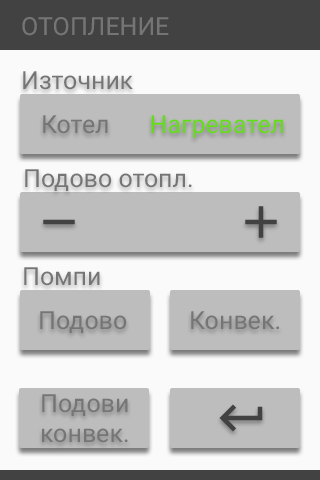
<style>
.page{position:relative;width:320px;height:480px;background:#fafafa}
.page>*{position:absolute;margin:0}
.t1{font:25px "Roboto-Regular";color:#757575}
.t2{font:25px "Roboto-Regular";color:#64dd17}
</style>
<div class="page">
<p class="t1" style="left:22px;top:17px;width:147px;height:19px">ОТОПЛЕНИЕ</p>
<p class="t1" style="left:23px;top:71px;width:110px;height:19px">Източник</p>
<p class="t1" style="left:43px;top:115px;width:65px;height:19px">Котел</p>
<p class="t2" style="left:151px;top:115px;width:132px;height:23px">Нагревател</p>
<p class="t1" style="left:25px;top:169px;width:167px;height:22px">Подово отопл.</p>
<p class="t1" style="left:24px;top:267px;width:76px;height:19px">Помпи</p>
<p class="t1" style="left:40px;top:311px;width:87px;height:22px">Подово</p>
<p class="t1" style="left:191px;top:311px;width:88px;height:19px">Конвек.</p>
<p class="t1" style="left:42px;top:394px;width:86px;height:49px">Подови<br>конвек.</p>
</div>
